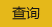
<style>
.page{position:relative;width:52px;height:27px;background:#e5b81a}
.page>*{position:absolute;margin:0}
.t1{font:14px "MicrosoftYaHei";color:#131313}
</style>
<div class="page">
<p class="t1" style="left:12px;top:6px;width:28px;height:14px">查询</p>
</div>
